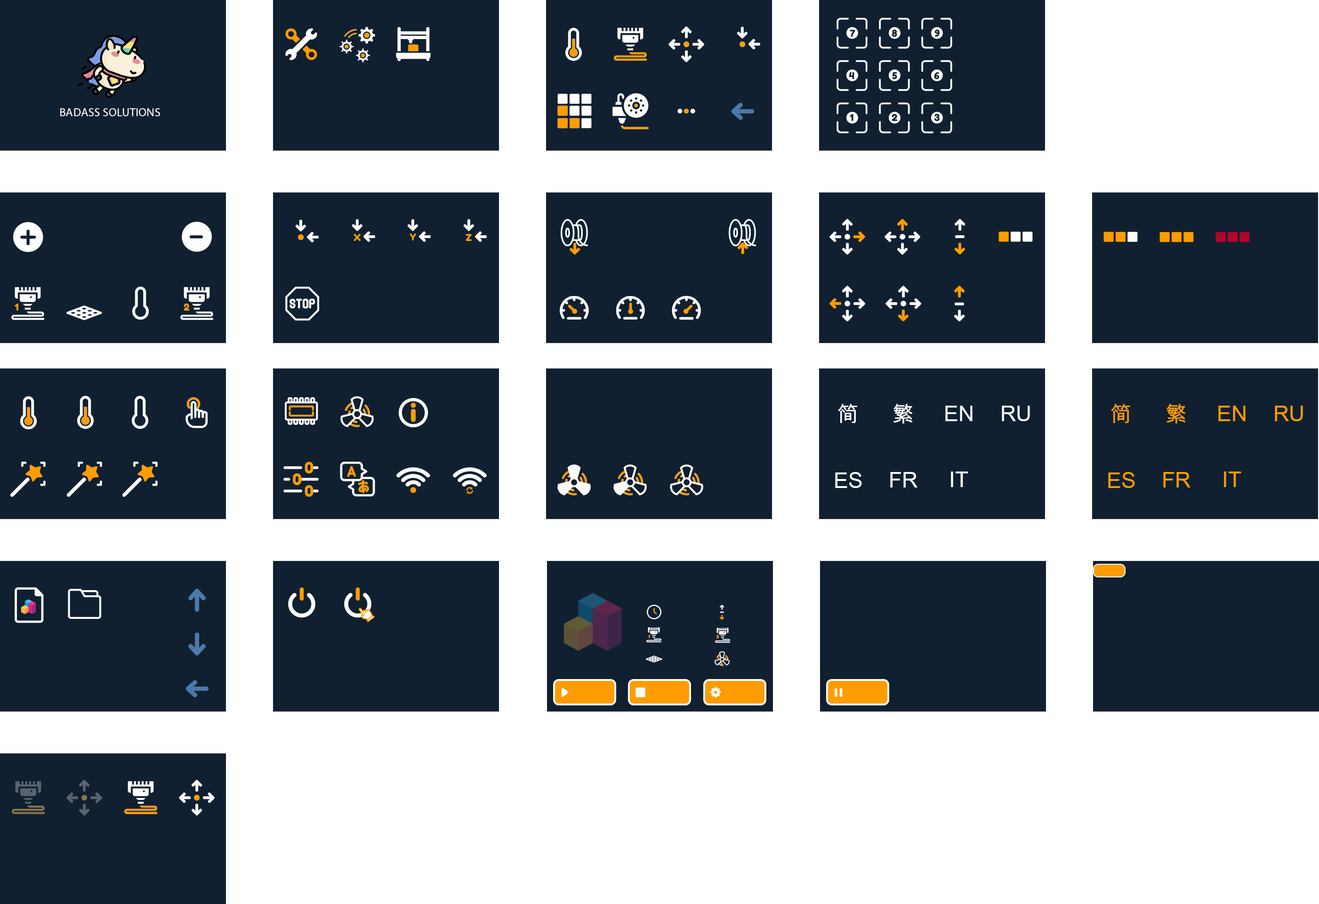
<style>
.page{position:relative;width:1319px;height:904px;background:#102031}
.page>*{position:absolute;margin:0}
.t1{font:9.6px "FredokaOne-Regular";color:#102031}
.t2{font:12px "MyriadPro-Regular";color:#ffffff}
.t3{font:9.6px "FredokaOne-Regular";color:#ff9c00}
.t4{font:21.5px "ArialUnicodeMS";color:#ffffff}
.t5{font:21.5px "ArialUnicodeMS";color:#ff9c00}
.t6{font:4.4px "FredokaOne-Regular";color:#ff9c00}
</style>
<div class="page">
<p class="t1" style="left:850px;top:30px;width:5px;height:7px">7</p>
<p class="t1" style="left:891px;top:29px;width:6px;height:8px">8</p>
<p class="t1" style="left:934px;top:30px;width:5px;height:7px">9</p>
<p class="t1" style="left:849px;top:72px;width:5px;height:7px">4</p>
<p class="t1" style="left:892px;top:72px;width:5px;height:8px">5</p>
<p class="t1" style="left:934px;top:72px;width:5px;height:8px">6</p>
<p class="t2" style="left:60px;top:108px;width:100px;height:8px">BADASS SOLUTIONS</p>
<p class="t1" style="left:850px;top:114px;width:3px;height:7px">1</p>
<p class="t1" style="left:891px;top:114px;width:7px;height:7px">2</p>
<p class="t1" style="left:934px;top:114px;width:5px;height:7px">3</p>
<p class="t3" style="left:353px;top:233px;width:8px;height:8px">X</p>
<p class="t3" style="left:409px;top:233px;width:7px;height:8px">Y</p>
<p class="t3" style="left:465px;top:234px;width:7px;height:7px">Z</p>
<p class="t3" style="left:15px;top:304px;width:3px;height:7px">1</p>
<p class="t3" style="left:184px;top:304px;width:6px;height:7px">2</p>
<p class="t4" style="left:838px;top:404px;width:19px;height:19px">简</p>
<p class="t4" style="left:893px;top:404px;width:20px;height:20px">繁</p>
<p class="t4" style="left:945px;top:406px;width:27px;height:15px">EN</p>
<p class="t4" style="left:1002px;top:406px;width:28px;height:15px">RU</p>
<p class="t5" style="left:1111px;top:404px;width:19px;height:19px">简</p>
<p class="t5" style="left:1166px;top:404px;width:20px;height:20px">繁</p>
<p class="t5" style="left:1218px;top:406px;width:27px;height:15px">EN</p>
<p class="t5" style="left:1275px;top:406px;width:28px;height:15px">RU</p>
<p class="t4" style="left:835px;top:472px;width:27px;height:16px">ES</p>
<p class="t4" style="left:890px;top:472px;width:27px;height:16px">FR</p>
<p class="t4" style="left:951px;top:472px;width:17px;height:15px">IT</p>
<p class="t5" style="left:1108px;top:472px;width:27px;height:16px">ES</p>
<p class="t5" style="left:1163px;top:472px;width:27px;height:16px">FR</p>
<p class="t5" style="left:1224px;top:472px;width:17px;height:15px">IT</p>
<p class="t6" style="left:648px;top:635px;width:2px;height:4px">1</p>
<p class="t6" style="left:716px;top:635px;width:3px;height:4px">2</p>
</div>
